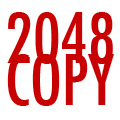
<style>
.page{position:relative;width:120px;height:120px;background:#ffffff}
.page>*{position:absolute;margin:0}
.t1{font:66.7px/41.7px "Futura-CondensedMedium";color:#c80202}
</style>
<div class="page">
<p class="t1" style="left:7px;top:12px;width:107px;height:94px">2048<br>COPY</p>
</div>
